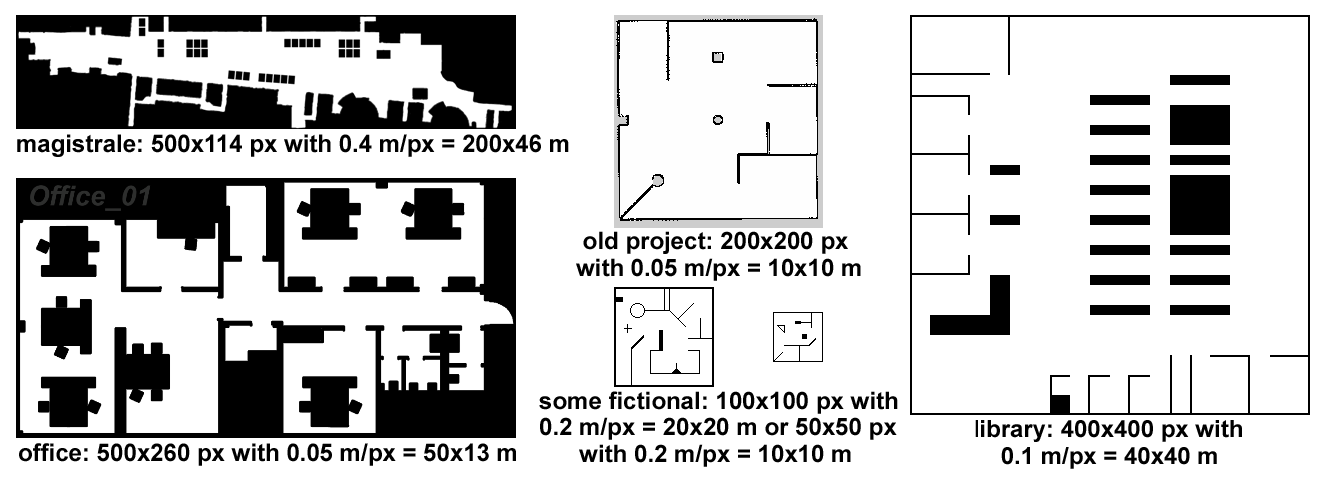
<style>
.page{position:relative;width:1326px;height:479px;background:#ffffff}
.page>*{position:absolute;margin:0}
.t1{font:24.3px "Arial-BoldMT";color:#000000}
.t2{font:23.9px/26.5px "Arial-BoldMT";color:#000000}
.t3{font:23.9px/26.5px "ArialMT";color:#000000}
</style>
<div class="page">
<p class="t1" style="left:17px;top:134px;width:552px;height:23px">magistrale: 500x114 px with 0.4 m/px = 200x46 m</p>
<p class="t2" style="left:576px;top:231px;width:285px;height:50px">old project: 200x200 px <br>with 0.05 m/px = 10x10 m</p>
<p class="t2" style="left:539px;top:391px;width:359px;height:76px">some fictional: 100x100 px with <br>0.2 m/px = 20x20 m or 50x50 px <br>      with 0.2 m/px = 10x10 m</p>
<p class="t2" style="left:975px;top:420px;width:267px;height:49px"><span class="t3">l</span>ibrary: 400x400 px with <br>    0.1 m/px = 40x40 m</p>
<p class="t1" style="left:19px;top:443px;width:497px;height:23px">office: 500x260 px with 0.05 m/px = 50x13 m</p>
</div>
